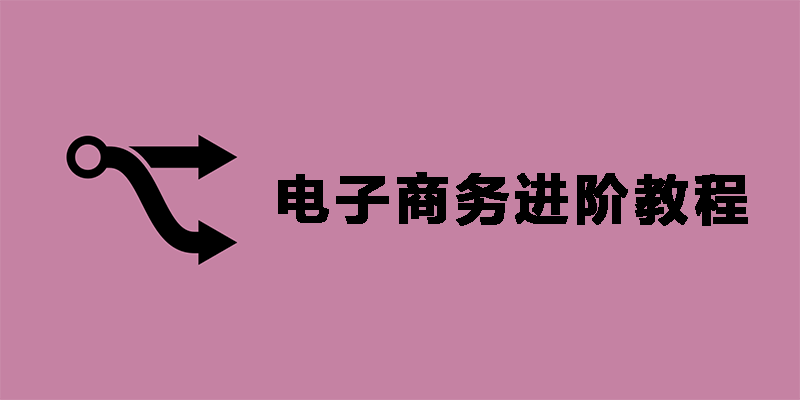
<style>
.page{position:relative;width:800px;height:400px;background:#c582a3}
.page>*{position:absolute;margin:0}
.t1{font:53px "MicrosoftYaHei-Bold";letter-spacing:0.1em;color:#000000;font-weight:bold}
</style>
<div class="page">
<p class="t1" style="left:278px;top:172px;width:470px;height:54px">电子商务进阶教程</p>
</div>
